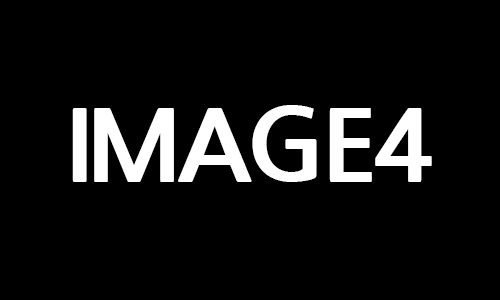
<style>
.page{position:relative;width:500px;height:300px;background:#000000}
.page>*{position:absolute;margin:0}
.t1{font:100px "NanumGothicExtraBold";letter-spacing:-0.05em;color:#ffffff;text-transform:uppercase}
</style>
<div class="page">
<p class="t1" style="left:72px;top:105px;width:360px;height:77px">imAge4</p>
</div>
